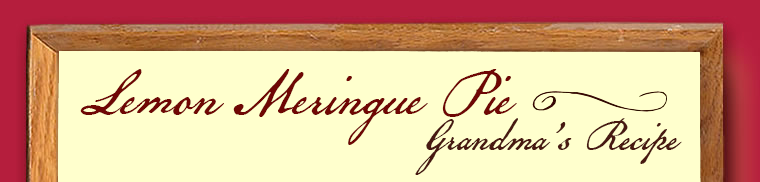
<style>
.page{position:relative;width:760px;height:182px;background:#ffffcd}
.page>*{position:absolute;margin:0}
.t1{font:72px "AmericanScribe";color:#6f0704}
.t2{font:50.1px "AmericanScribe";color:#481911}
</style>
<div class="page">
<p class="t1" style="left:80px;top:69px;width:437px;height:76px">Lemon Meringue Pie</p>
<p class="t2" style="left:415px;top:118px;width:267px;height:57px">Grandma’s Recipe</p>
</div>
